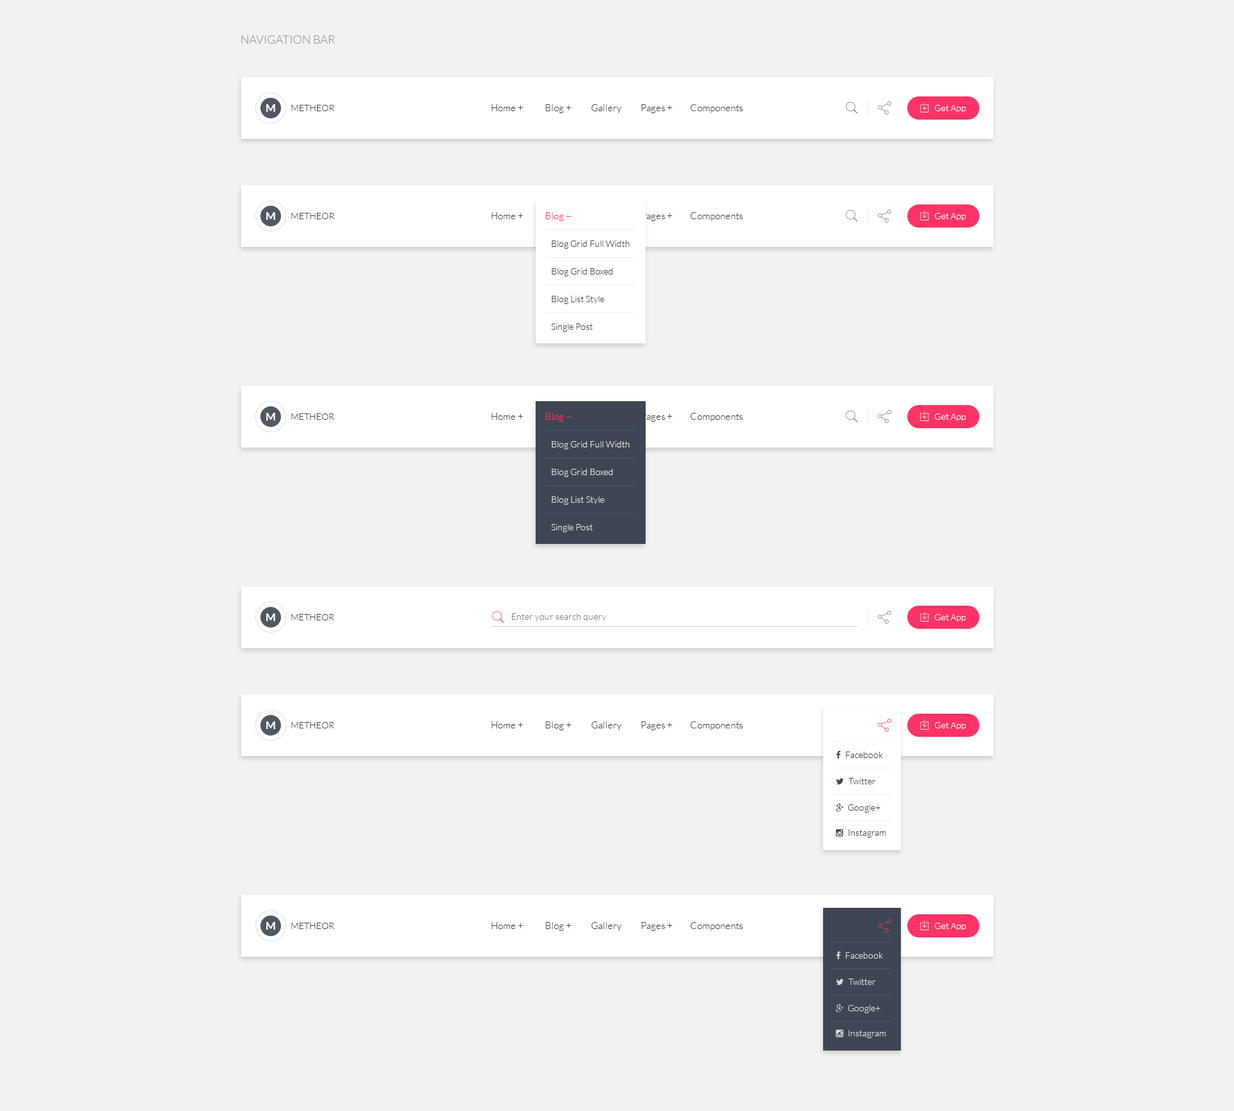
<style>
.page{position:relative;width:1234px;height:1111px;background:#f2f2f2}
.page>*{position:absolute;margin:0}
.t1{font:11.6px "Lato-Light";color:#999999;text-transform:uppercase}
.t2{font:10.9px "Lato-Bold";color:#ffffff}
.t3{font:9px "Lato-Light";color:#3d4652}
.t4{font:9.6px "Lato-Light";color:#3d4652}
.t5{font:9px "Lato-Light";color:#fefefe}
.t6{font:9.6px "Lato-Light";color:#ff3366}
.t7{font:9px "Lato-Light";color:#e1e2e3}
.t8{font:9px "Lato-Light";color:#808080}
.t9{font:9px "Lato-Light";color:#d8dadc}
.t10{font:9px "Lato-Light";color:#d7d9dc}
</style>
<div class="page">
<p class="t1" style="left:241px;top:35px;width:94px;height:9px">Navigation Bar</p>
<p class="t2" style="left:266px;top:104px;width:9px;height:8px">M</p>
<p class="t3" style="left:291px;top:105px;width:43px;height:6px">METHEOR</p>
<p class="t4" style="left:491px;top:104px;width:251px;height:9px">Home +           Blog +          Gallery          Pages +         Components</p>
<p class="t5" style="left:934px;top:105px;width:32px;height:8px">Get App</p>
<p class="t2" style="left:266px;top:212px;width:9px;height:8px">M</p>
<p class="t3" style="left:291px;top:213px;width:43px;height:6px">METHEOR</p>
<p class="t4" style="left:491px;top:212px;width:251px;height:9px">Home +           Blog +          Gallery          Pages +         Components</p>
<p class="t6" style="left:545px;top:212px;width:19px;height:9px">Blog</p>
<p class="t5" style="left:934px;top:213px;width:32px;height:8px">Get App</p>
<p class="t3" style="left:552px;top:240px;width:77px;height:9px">Blog Grid Full Width</p>
<p class="t3" style="left:552px;top:268px;width:61px;height:8px">Blog Grid Boxed</p>
<p class="t3" style="left:552px;top:296px;width:52px;height:8px">Blog List Style</p>
<p class="t3" style="left:551px;top:323px;width:42px;height:9px">Single Post</p>
<p class="t2" style="left:266px;top:413px;width:9px;height:7px">M</p>
<p class="t3" style="left:291px;top:413px;width:43px;height:7px">METHEOR</p>
<p class="t6" style="left:545px;top:413px;width:19px;height:9px">Blog</p>
<p class="t5" style="left:934px;top:413px;width:32px;height:8px">Get App</p>
<p class="t7" style="left:552px;top:441px;width:77px;height:8px">Blog Grid Full Width</p>
<p class="t7" style="left:552px;top:469px;width:61px;height:8px">Blog Grid Boxed</p>
<p class="t7" style="left:552px;top:496px;width:52px;height:9px">Blog List Style</p>
<p class="t7" style="left:551px;top:524px;width:42px;height:8px">Single Post</p>
<p class="t2" style="left:266px;top:613px;width:9px;height:8px">M</p>
<p class="t3" style="left:291px;top:614px;width:43px;height:6px">METHEOR</p>
<p class="t8" style="left:512px;top:613px;width:94px;height:8px">Enter your search query</p>
<p class="t5" style="left:934px;top:614px;width:32px;height:8px">Get App</p>
<p class="t2" style="left:266px;top:721px;width:9px;height:8px">M</p>
<p class="t3" style="left:291px;top:722px;width:43px;height:6px">METHEOR</p>
<p class="t4" style="left:491px;top:721px;width:251px;height:9px">Home +           Blog +          Gallery          Pages +         Components</p>
<p class="t5" style="left:934px;top:722px;width:32px;height:8px">Get App</p>
<p class="t3" style="left:845px;top:752px;width:38px;height:6px">Facebook</p>
<p class="t3" style="left:848px;top:778px;width:28px;height:6px">Twitter</p>
<p class="t3" style="left:848px;top:804px;width:32px;height:9px">Google+</p>
<p class="t3" style="left:848px;top:829px;width:38px;height:9px">Instagram</p>
<p class="t2" style="left:266px;top:922px;width:9px;height:8px">M</p>
<p class="t3" style="left:291px;top:923px;width:43px;height:6px">METHEOR</p>
<p class="t4" style="left:491px;top:922px;width:251px;height:9px">Home +           Blog +          Gallery          Pages +         Components</p>
<p class="t5" style="left:934px;top:923px;width:32px;height:7px">Get App</p>
<p class="t9" style="left:845px;top:952px;width:38px;height:7px">Facebook</p>
<p class="t9" style="left:848px;top:978px;width:28px;height:7px">Twitter</p>
<p class="t10" style="left:848px;top:1005px;width:32px;height:8px">Google+</p>
<p class="t9" style="left:848px;top:1030px;width:38px;height:8px">Instagram</p>
</div>
